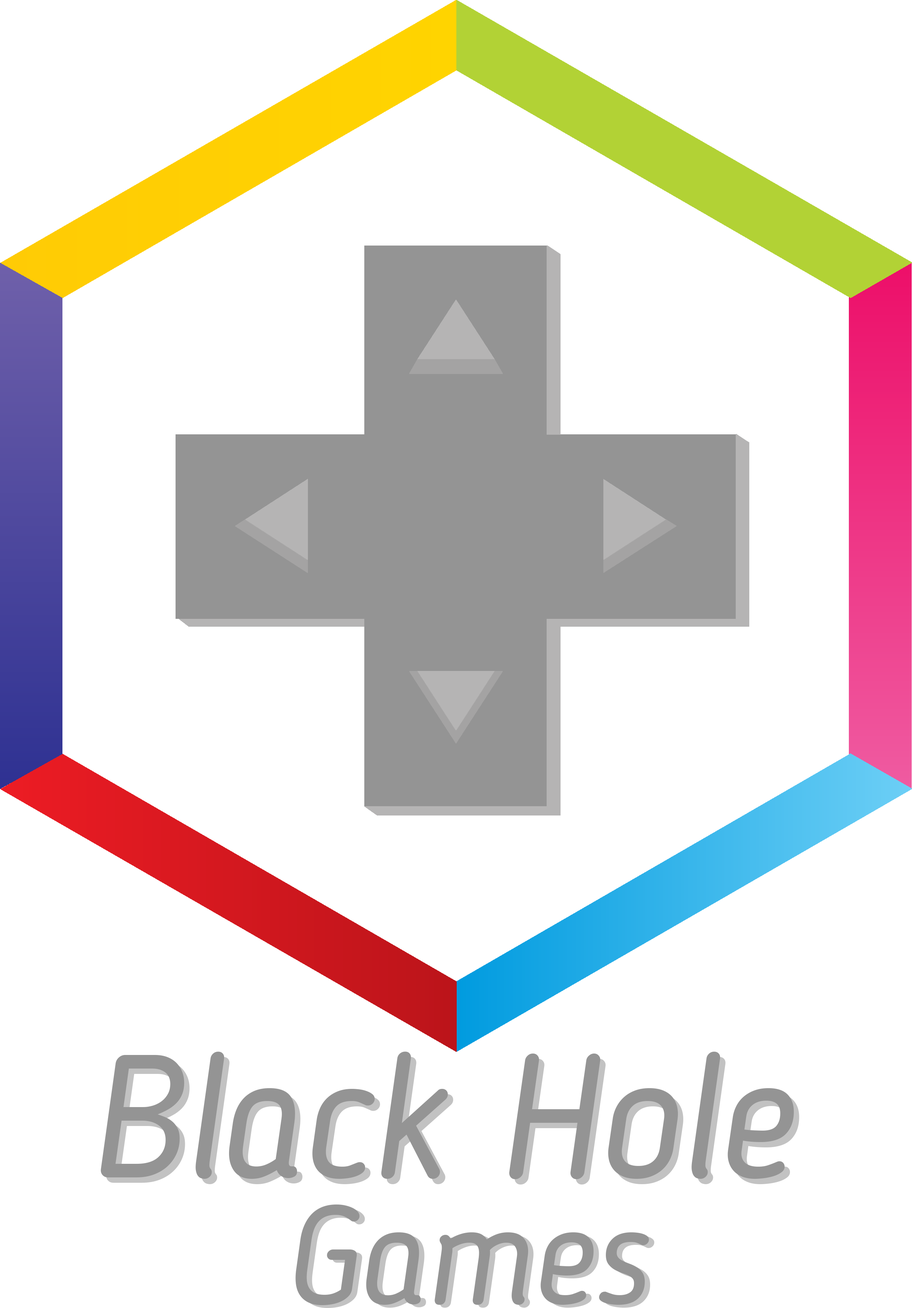
<style>
.page{position:relative;width:912px;height:1308px;background:#ffffff}
.page>*{position:absolute;margin:0}
.t1{font:173.4px "BloggerSans-Italic";color:#949494}
.t2{font:173.4px "BloggerSans-Italic"}
.t3{font:138.7px "BloggerSans-Italic";color:#949494}
.t4{font:138.7px "BloggerSans-Italic"}
</style>
<div class="page">
<p class="t1" style="left:101px;top:1051px;width:693px;height:128px">Black Hole</p>
<p class="t2" style="left:106px;top:1056px;width:693px;height:128px">Black Hole</p>
<p class="t3" style="left:295px;top:1204px;width:354px;height:101px">Games</p>
<p class="t4" style="left:301px;top:1207px;width:353px;height:101px">Games</p>
</div>
